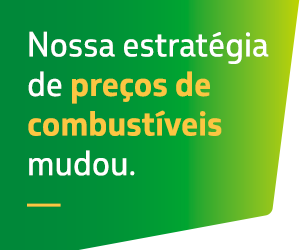
<style>
.page{position:relative;width:300px;height:250px}
.page>*{position:absolute;margin:0}
.t1{font:33.3px/39.6px "PetrobrasSans-Bold";color:#fbc642}
.t2{font:33.3px/39.6px "PetrobrasSans-Regular";color:#ffffff}
.t3{font:33.3px/39.6px "PetrobrasSans-Regular";color:#fbc642}
</style>
<div class="page">
<p class="t1" style="left:27px;top:31px;width:242px;height:176px"><span class="t2">Nossa estratégia de </span>preços de combustíveis<span class="t2"> mudou.<br></span><span class="t3">—</span></p>
</div>
